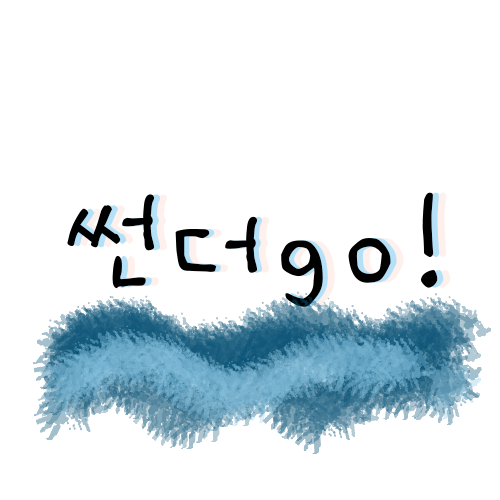
<style>
.page{position:relative;width:500px;height:500px;background:#ffffff}
.page>*{position:absolute;margin:0}
.t1{font:127.5px "HUScri13";color:#000000}
.t2{font:127.5px "HUScri13"}
</style>
<div class="page">
<p class="t1" style="left:67px;top:192px;width:371px;height:115px">썬더go!</p>
<p class="t2" style="left:73px;top:192px;width:371px;height:115px">썬더go!</p>
</div>
